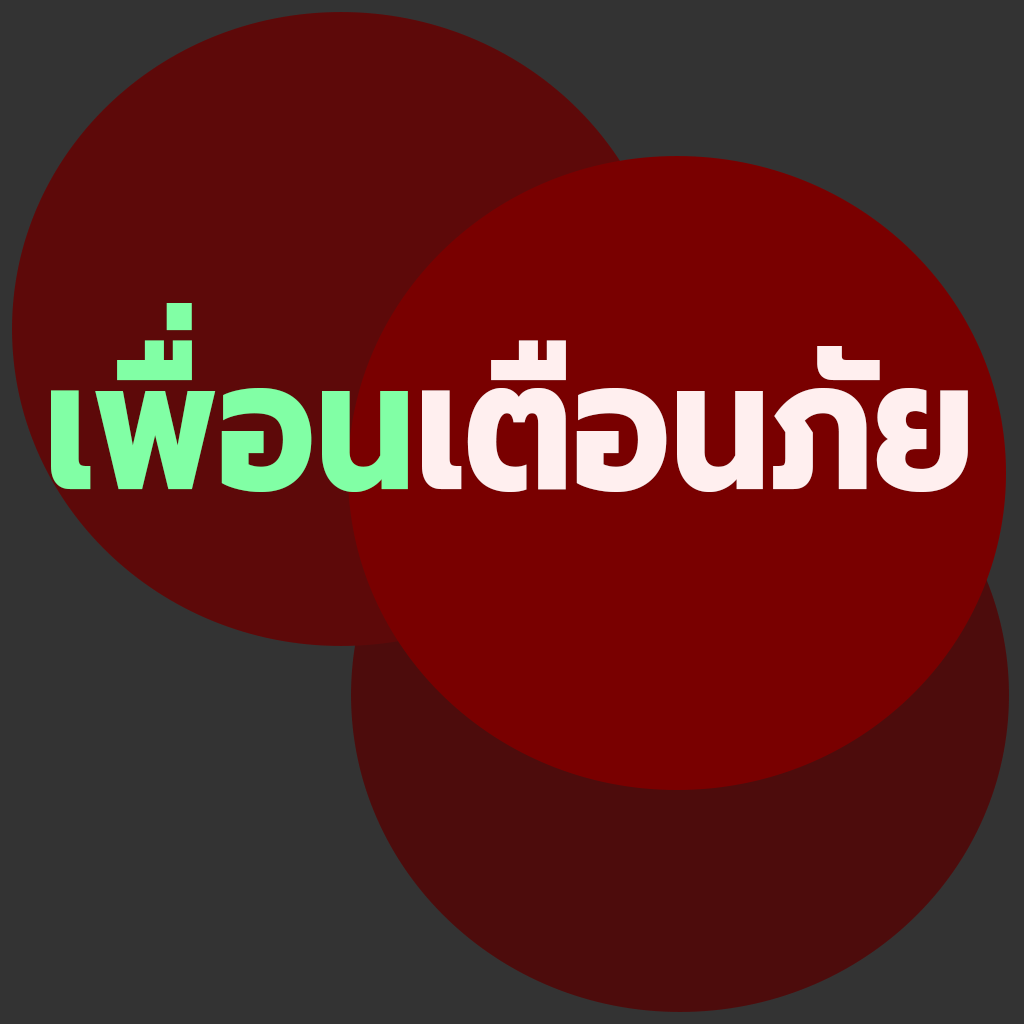
<style>
.page{position:relative;width:1024px;height:1024px;background:#333333}
.page>*{position:absolute;margin:0}
.t1{font:183.9px "Prompt-Bold";color:#ffefef;scale:0.85 1}
.t2{font:183.9px "Prompt-Bold";color:#81ffa5;scale:0.85 1}
</style>
<div class="page">
<p class="t1" style="left:51px;top:303px;width:917px;height:189px"><span class="t2">เพื่อน</span>เตือนภัย</p>
</div>
